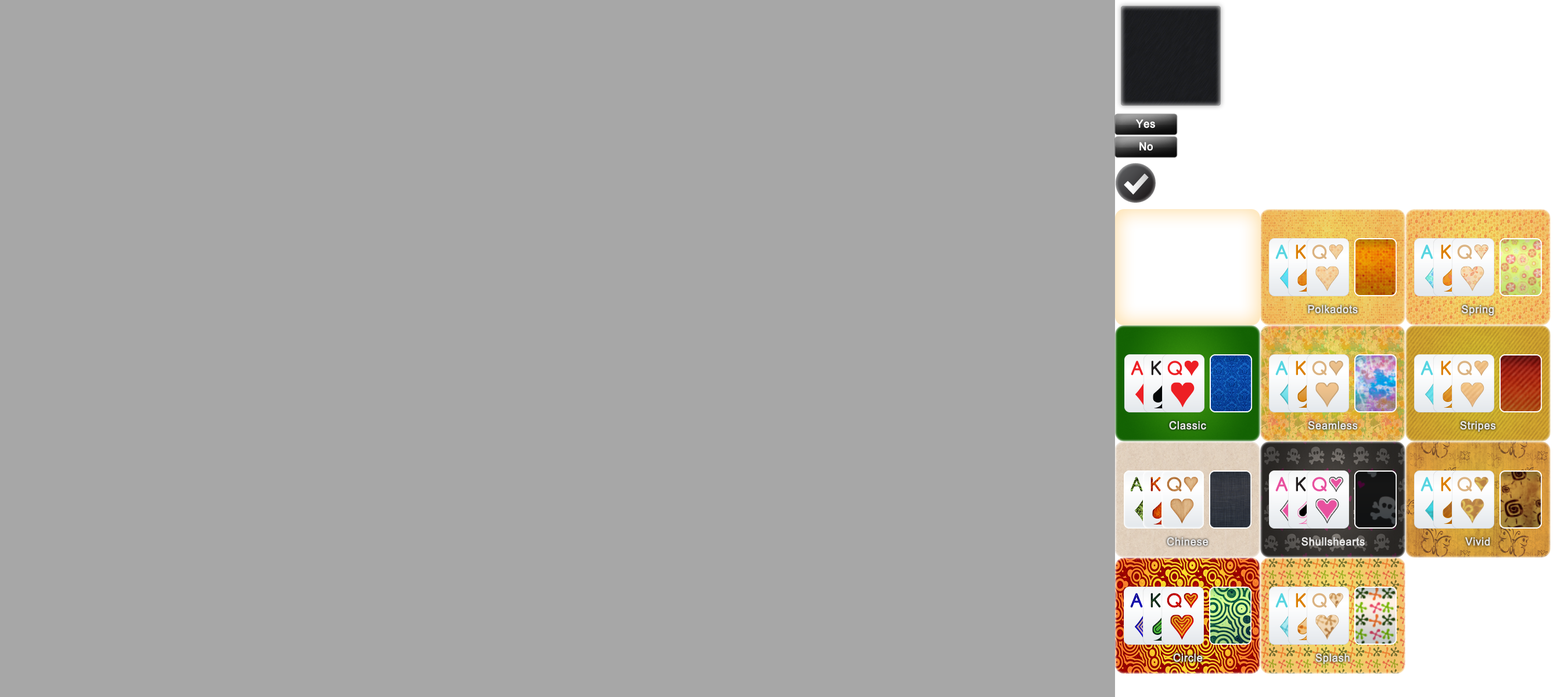
<style>
.page{position:relative;width:1568px;height:697px;background:#a7a7a7}
.page>*{position:absolute;margin:0}
.t1{font:11px "ArialMT";letter-spacing:0.025em;color:#ffffff;font-weight:bold;scale:0.95 1}
.t2{font:11px "ArialMT";letter-spacing:0.025em;color:#e6e6e6;font-weight:bold;scale:0.95 1}
</style>
<div class="page">
<p class="t1" style="left:1136px;top:119px;width:19px;height:9px">Yes</p>
<p class="t1" style="left:1139px;top:142px;width:14px;height:9px">No</p>
<p class="t2" style="left:1308px;top:305px;width:50px;height:9px">Polkadots</p>
<p class="t2" style="left:1461px;top:304px;width:33px;height:12px">Spring</p>
<p class="t2" style="left:1169px;top:420px;width:37px;height:10px">Classic</p>
<p class="t2" style="left:1308px;top:420px;width:50px;height:10px">Seamless</p>
<p class="t2" style="left:1460px;top:420px;width:36px;height:12px">Stripes</p>
<p class="t2" style="left:1167px;top:537px;width:42px;height:9px">Chinese</p>
<p class="t2" style="left:1301px;top:537px;width:64px;height:9px">Shullshearts</p>
<p class="t2" style="left:1465px;top:537px;width:25px;height:9px">Vivid</p>
<p class="t2" style="left:1173px;top:653px;width:30px;height:9px">Circle</p>
<p class="t2" style="left:1315px;top:653px;width:35px;height:11px">Splash</p>
</div>
